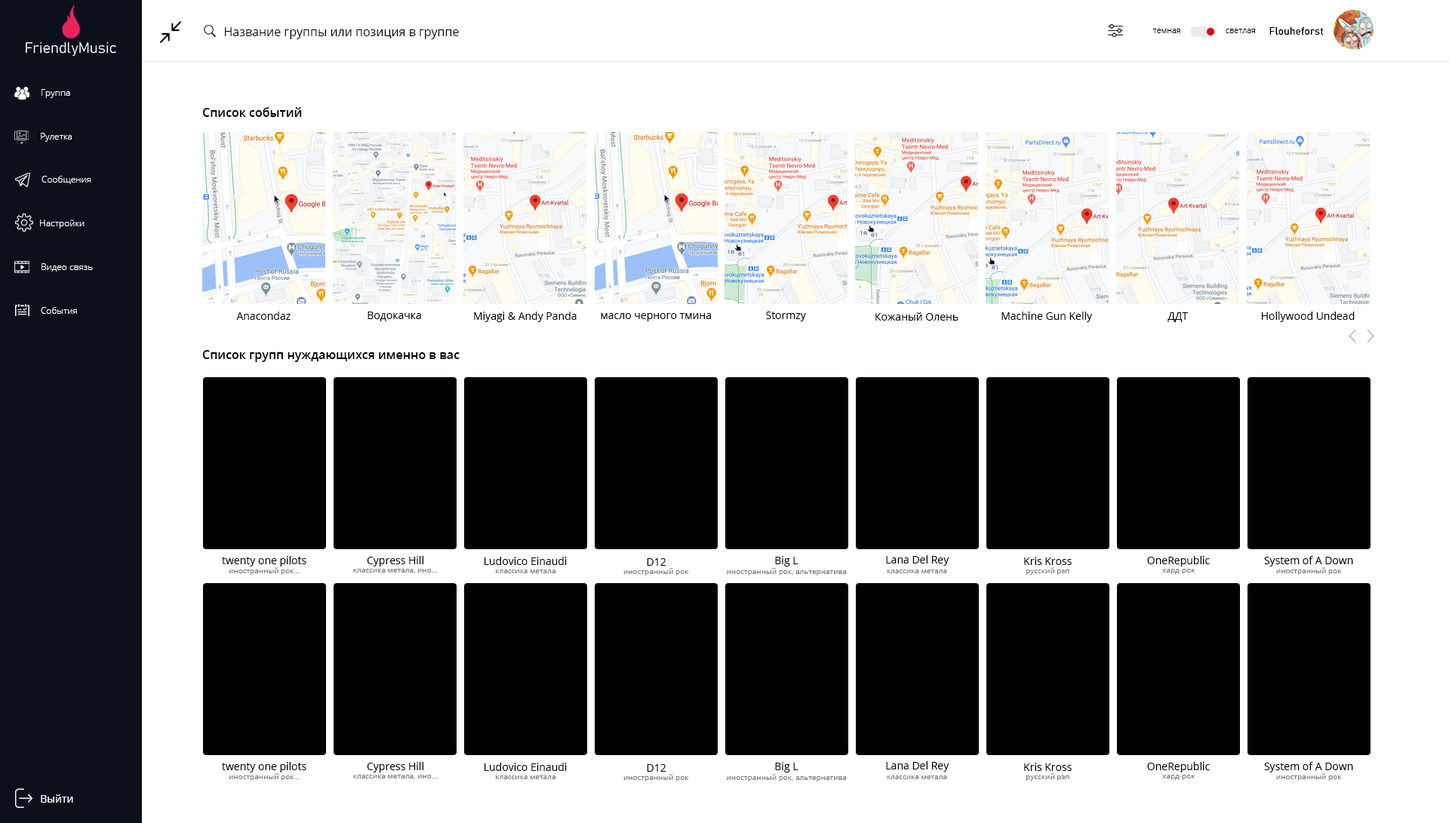
<style>
.page{position:relative;width:1449px;height:823px;background:#ffffff}
.page>*{position:absolute;margin:0}
.t1{font:12.1px "OpenSans";color:#000000}
.t2{font:8.3px "OpenSans-Light";color:#000000}
.t3{font:10.6px "Bahnschrift";color:#000000}
.t4{font:9.1px "OpenSans-Light";color:#ffffff}
.t5{font:12.1px "OpenSans-Semibold";color:#000000}
.t6{font:10.6px "OpenSans";color:#000000}
.t7{font:7.5px "OpenSans";color:#777777}
.t8{font:10.6px "OpenSans";color:#ffffff}
</style>
<div class="page">
<p class="t1" style="left:225px;top:27px;width:234px;height:12px">Название группы или позиция в группе</p>
<p class="t2" style="left:1152px;top:29px;width:28px;height:4px">темная</p>
<p class="t2" style="left:1225px;top:29px;width:30px;height:4px">светлая</p>
<p class="t3" style="left:1269px;top:26px;width:54px;height:9px">Flouheforst</p>
<p class="t4" style="left:41px;top:89px;width:29px;height:9px">Группа</p>
<p class="t5" style="left:202px;top:107px;width:100px;height:10px">Список событий</p>
<p class="t4" style="left:41px;top:133px;width:31px;height:9px">Рулетка</p>
<p class="t4" style="left:41px;top:176px;width:50px;height:8px">Сообщения</p>
<p class="t4" style="left:40px;top:220px;width:45px;height:9px">Настройки</p>
<p class="t4" style="left:41px;top:263px;width:52px;height:9px">Видео связь</p>
<p class="t4" style="left:41px;top:307px;width:36px;height:7px">События</p>
<p class="t6" style="left:236px;top:312px;width:54px;height:8px">Anacondaz</p>
<p class="t6" style="left:367px;top:312px;width:54px;height:9px">Водокачка</p>
<p class="t6" style="left:474px;top:312px;width:102px;height:10px">Miyagi &amp; Andy Panda</p>
<p class="t6" style="left:601px;top:313px;width:110px;height:8px">масло черного тмина</p>
<p class="t6" style="left:766px;top:312px;width:40px;height:9px">Stormzy</p>
<p class="t6" style="left:875px;top:312px;width:83px;height:9px">Кожаный Олень</p>
<p class="t6" style="left:1001px;top:312px;width:92px;height:10px">Machine Gun Kelly</p>
<p class="t6" style="left:1167px;top:312px;width:21px;height:10px">ДДТ</p>
<p class="t6" style="left:1262px;top:312px;width:92px;height:10px">Hollywood Undead</p>
<p class="t5" style="left:202px;top:350px;width:257px;height:12px">Список групп нуждающихся именно в вас</p>
<p class="t6" style="left:222px;top:556px;width:84px;height:11px">twenty one pilots</p>
<p class="t6" style="left:367px;top:556px;width:56px;height:11px">Cypress Hill</p>
<p class="t6" style="left:484px;top:557px;width:83px;height:8px">Ludovico Einaudi</p>
<p class="t6" style="left:775px;top:556px;width:23px;height:11px">Big L</p>
<p class="t6" style="left:886px;top:555px;width:63px;height:11px">Lana Del Rey</p>
<p class="t6" style="left:1024px;top:557px;width:47px;height:8px">Kris Kross</p>
<p class="t6" style="left:1147px;top:556px;width:62px;height:11px">OneRepublic</p>
<p class="t6" style="left:1264px;top:556px;width:89px;height:11px">System of A Down</p>
<p class="t7" style="left:229px;top:567px;width:71px;height:8px">иностранный рок...</p>
<p class="t7" style="left:353px;top:569px;width:84px;height:4px">классика метала, ино...</p>
<p class="t7" style="left:496px;top:570px;width:59px;height:3px">классика метала</p>
<p class="t7" style="left:623px;top:568px;width:66px;height:8px">иностранный рок</p>
<p class="t6" style="left:647px;top:558px;width:19px;height:8px">D12</p>
<p class="t7" style="left:727px;top:568px;width:120px;height:8px">иностранный рок, альтернатива</p>
<p class="t7" style="left:887px;top:570px;width:60px;height:3px">классика метала</p>
<p class="t7" style="left:1026px;top:567px;width:43px;height:8px">русский рэп</p>
<p class="t7" style="left:1162px;top:569px;width:33px;height:5px">хард-рок</p>
<p class="t7" style="left:1276px;top:567px;width:65px;height:8px">иностранный рок</p>
<p class="t6" style="left:886px;top:761px;width:63px;height:11px">Lana Del Rey</p>
<p class="t6" style="left:222px;top:762px;width:84px;height:11px">twenty one pilots</p>
<p class="t7" style="left:229px;top:773px;width:71px;height:8px">иностранный рок...</p>
<p class="t6" style="left:367px;top:762px;width:56px;height:11px">Cypress Hill</p>
<p class="t6" style="left:484px;top:763px;width:83px;height:8px">Ludovico Einaudi</p>
<p class="t6" style="left:647px;top:764px;width:19px;height:8px">D12</p>
<p class="t6" style="left:775px;top:762px;width:23px;height:11px">Big L</p>
<p class="t6" style="left:1024px;top:763px;width:47px;height:8px">Kris Kross</p>
<p class="t7" style="left:1026px;top:773px;width:43px;height:8px">русский рэп</p>
<p class="t6" style="left:1147px;top:762px;width:62px;height:11px">OneRepublic</p>
<p class="t6" style="left:1264px;top:762px;width:89px;height:11px">System of A Down</p>
<p class="t7" style="left:1276px;top:773px;width:65px;height:8px">иностранный рок</p>
<p class="t7" style="left:353px;top:775px;width:84px;height:4px">классика метала, ино...</p>
<p class="t7" style="left:496px;top:776px;width:59px;height:3px">классика метала</p>
<p class="t7" style="left:623px;top:774px;width:66px;height:8px">иностранный рок</p>
<p class="t7" style="left:727px;top:774px;width:120px;height:8px">иностранный рок, альтернатива</p>
<p class="t7" style="left:887px;top:776px;width:60px;height:3px">классика метала</p>
<p class="t7" style="left:1162px;top:775px;width:33px;height:5px">хард-рок</p>
<p class="t8" style="left:41px;top:794px;width:32px;height:9px">Выйти</p>
</div>
